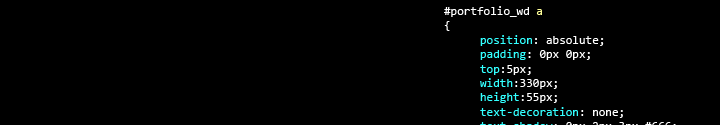
<style>
.page{position:relative;width:720px;height:125px;background:#000000}
.page>*{position:absolute;margin:0}
.t1{font:12px "Consolas";color:#ffffff}
.t2{font:12px "Consolas";color:#ffff99}
.t3{font:12px "Consolas";color:#33ffff}
</style>
<div class="page">
<p class="t1" style="left:444px;top:6px;width:232px;height:119px">#portfolio_wd <span class="t2">a<br></span>{<br> <span class="t3">position</span>: absolute;<br> <span class="t3">padding</span>: 0px 0px;<br> <span class="t3">top</span>:5px;<br> <span class="t3">width</span>:330px;<br> <span class="t3">height</span>:55px;<br><span class="t3"> text-decoration</span>: none;<br> <span class="t3">text-shadow</span>: 0px 2px 3px #666;<br><span class="t3"> color</span>:#fff;<br>}<br>#portfolio_wd <span class="t2">a</span>:hover<br>{<br> <span class="t3">text-decoration</span>: none;<br> <span class="t3">opacity</span>:0.8;<br> <span class="t3">-moz-opacity</span>:0.8;<br>}</p>
</div>
